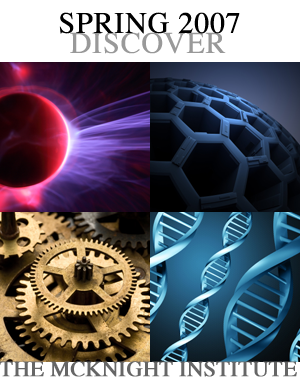
<style>
.page{position:relative;width:300px;height:388px}
.page>*{position:absolute;margin:0}
.t1{font:30px "Times-Roman";color:#000000;font-weight:bold}
.t2{font:30px "Times-Roman";color:#999999;font-weight:bold}
.t3{font:22px "Times-Roman";color:#666666;font-weight:bold}
</style>
<div class="page">
<p class="t1" style="left:59px;top:12px;width:181px;height:22px">SPRING 2007</p>
<p class="t2" style="left:70px;top:32px;width:156px;height:22px">DISCOVER</p>
<p class="t3" style="left:0px;top:361px;width:297px;height:16px">THE MCKNIGHT INSTITUTE</p>
</div>
